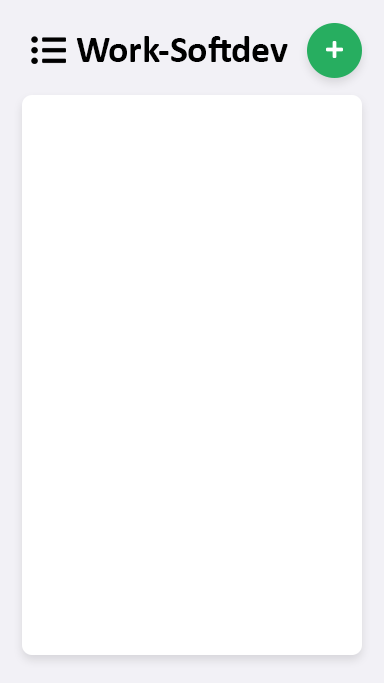
<style>
.page{position:relative;width:384px;height:683px;background:#ffffff}
.page>*{position:absolute;margin:0}
.t1{font:37.5px "Calibri-Bold";color:#000000}
</style>
<div class="page">
<p class="t1" style="left:76px;top:36px;width:212px;height:26px">Work-Softdev</p>
</div>
